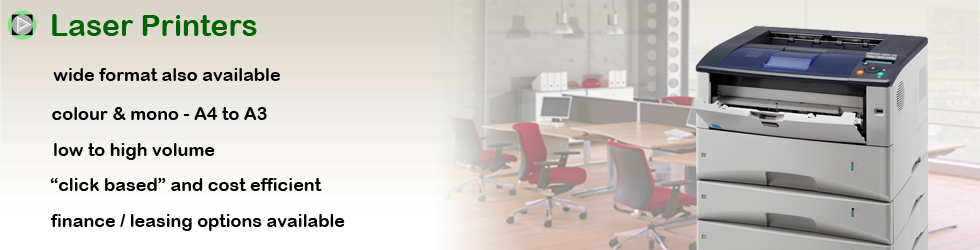
<style>
.page{position:relative;width:980px;height:250px}
.page>*{position:absolute;margin:0}
.t1{font:30px "ArialRoundedMTBold";color:#006400}
.t2{font:18px "ArialRoundedMTBold";color:#000000}
</style>
<div class="page">
<p class="t1" style="left:52px;top:14px;width:205px;height:22px">Laser Printers</p>
<p class="t2" style="left:53px;top:68px;width:227px;height:13px">wide format also available</p>
<p class="t2" style="left:52px;top:107px;width:215px;height:13px">colour &amp; mono - A4 to A3</p>
<p class="t2" style="left:54px;top:143px;width:161px;height:17px">low to high volume</p>
<p class="t2" style="left:50px;top:178px;width:272px;height:13px">“click based” and cost efficient</p>
<p class="t2" style="left:50px;top:214px;width:295px;height:17px">finance / leasing options available</p>
</div>
